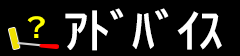
<style>
.page{position:relative;width:240px;height:56px;background:#000000}
.page>*{position:absolute;margin:0}
.t1{font:26.1px "BIZ-UDPGothic-Bold";color:#ffff00}
.t2{font:44.8px "BIZ-UDPGothic-Bold";color:#ffffff}
</style>
<div class="page">
<p class="t1" style="left:27px;top:16px;width:18px;height:22px">?</p>
<p class="t2" style="left:65px;top:8px;width:157px;height:43px">ｱﾄﾞﾊﾞｲｽ</p>
</div>
